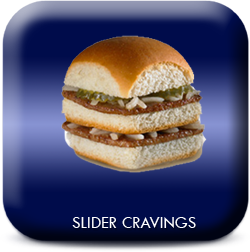
<style>
.page{position:relative;width:250px;height:252px}
.page>*{position:absolute;margin:0}
.t1{font:16.7px "TwCenMT-Regular";letter-spacing:0.01em;color:#ffffff;font-variant:small-caps}
</style>
<div class="page">
<p class="t1" style="left:72px;top:217px;width:124px;height:11px">SLIDER CRAVINGS</p>
</div>
